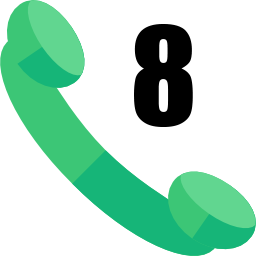
<style>
.page{position:relative;width:256px;height:256px;background:#ffffff}
.page>*{position:absolute;margin:0}
.t1{font:125px "Impact";color:#000000}
</style>
<div class="page">
<p class="t1" style="left:134px;top:24px;width:59px;height:103px">8</p>
</div>
